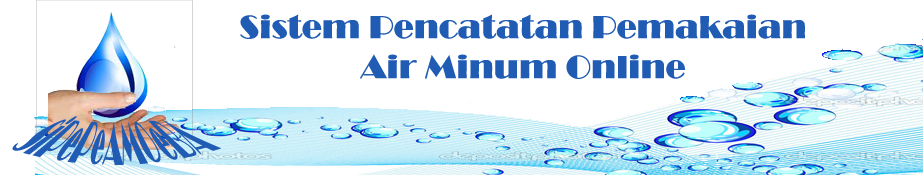
<style>
.page{position:relative;width:923px;height:175px;background:#ffffff}
.page>*{position:absolute;margin:0}
.t1{font:33.3px "Broadway";color:#215cb4}
.t2{font:25px "Broadway";color:#215cb4}
</style>
<div class="page">
<p class="t1" style="left:240px;top:14px;width:565px;height:65px;text-align:center">Sistem Pencatatan Pemakaian<br>Air Minum Online</p>
<p class="t2" style="left:12px;top:116px;width:210px;height:49px;text-align:center">SiPePeAMOeBA</p>
</div>
